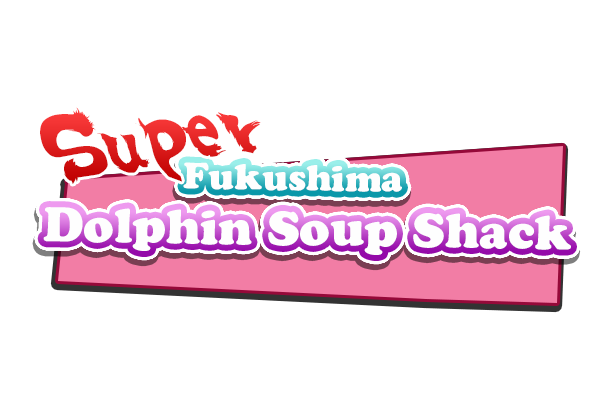
<style>
.page{position:relative;width:600px;height:400px;background:#ffffff}
.page>*{position:absolute;margin:0}
.t1{font:57.6px "SSF4-ABUKET-Regular";color:#e32424}
.t2{font:36px "CooperBlackStd";color:#fefefe}
.t3{font:48px "CooperBlackStd";color:#fefefe}
</style>
<div class="page">
<p class="t1" style="left:40px;top:107px;width:221px;height:77px;rotate:-9deg">Super</p>
<p class="t2" style="left:183px;top:162px;width:219px;height:30px;rotate:1deg">Fukushima</p>
<p class="t3" style="left:43px;top:207px;width:528px;height:48px;rotate:1deg">Dolphin Soup Shack</p>
</div>
